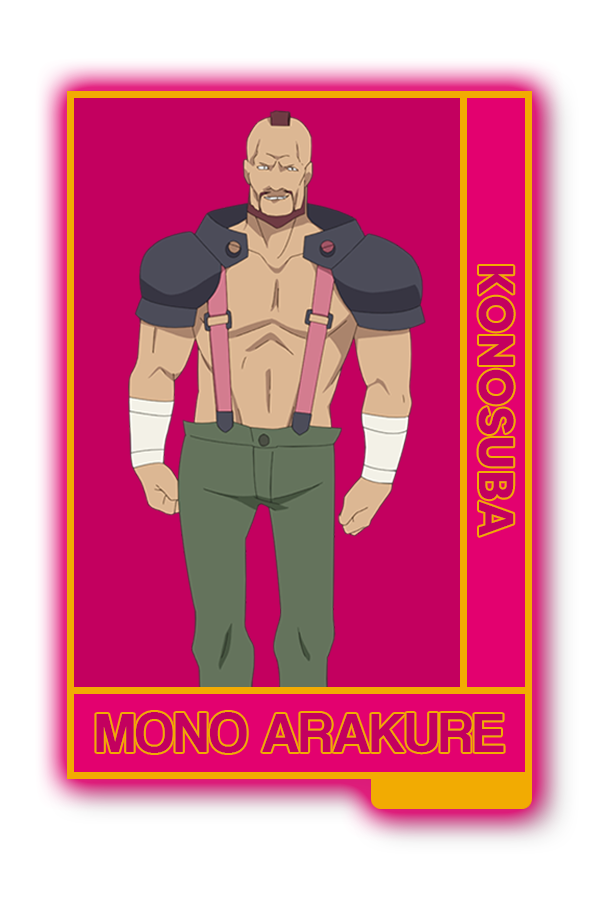
<style>
.page{position:relative;width:600px;height:900px;background:#c3005f}
.page>*{position:absolute;margin:0}
.t1{font:48.8px "MADETOMMY-Bold";color:#c3005f}
.t2{font:58.2px "CoolveticaRg-Regular";color:#c3005f}
</style>
<div class="page">
<p class="t1" style="left:478px;top:266px;width:36px;height:270px;rotate:90deg">KONOSUBA</p>
<p class="t2" style="left:96px;top:712px;width:408px;height:41px">MONO ARAKURE</p>
</div>
